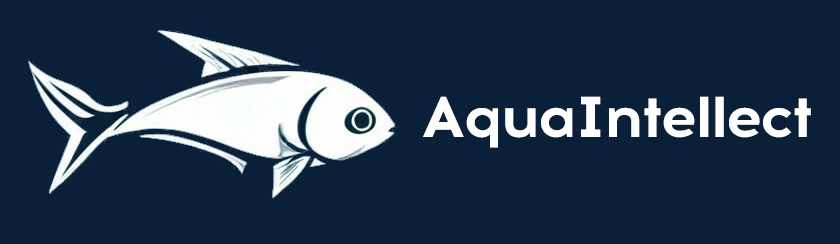
<style>
.page{position:relative;width:840px;height:244px;background:#092038}
.page>*{position:absolute;margin:0}
.t1{font:57.6px "Acrom-Bold";letter-spacing:-0.05em;color:#ffffff;scale:1.08 1}
</style>
<div class="page">
<p class="t1" style="left:423px;top:96px;width:388px;height:52px">AquaIntellect</p>
</div>
